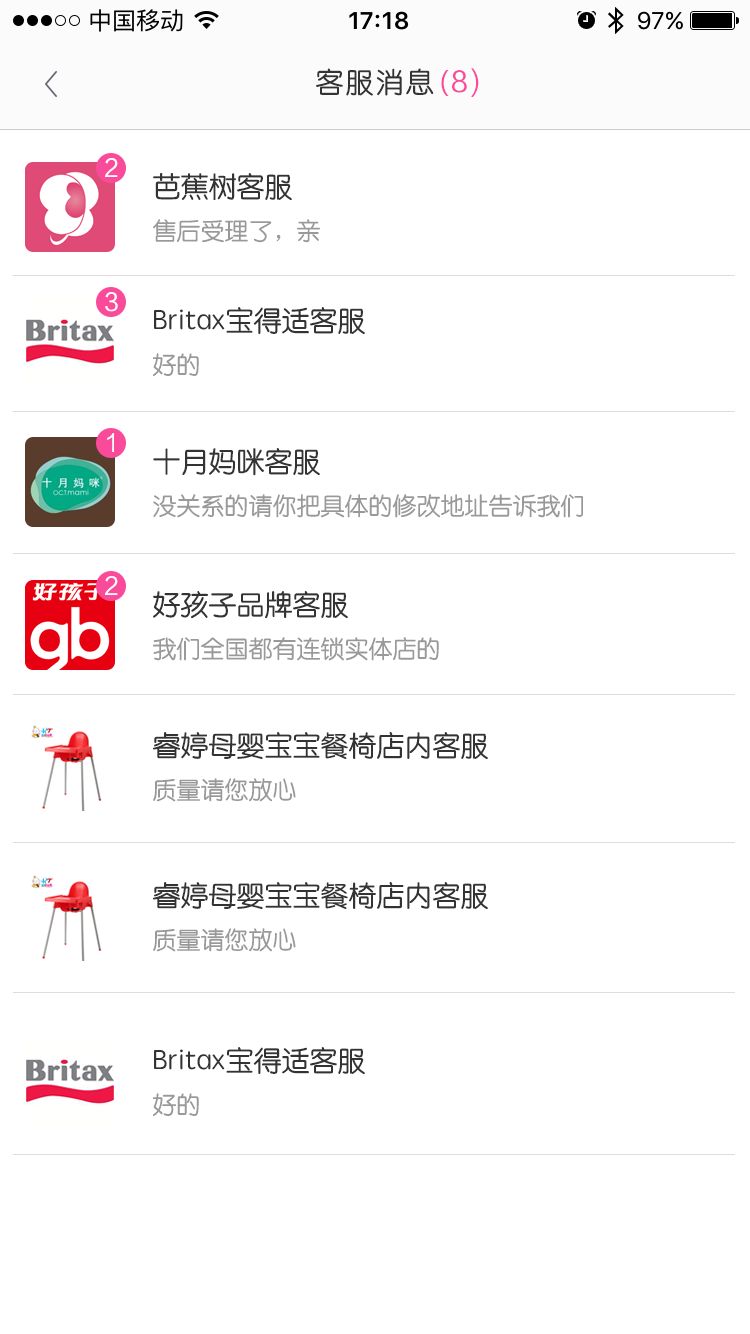
<style>
.page{position:relative;width:750px;height:1334px;background:#ffffff}
.page>*{position:absolute;margin:0}
.t1{font:28px "STYuanti-SC-Regular";letter-spacing:0.075em;color:#333333}
.t2{font:28px "FZLTHK_ZJRB--GBK1-0";letter-spacing:0.075em;color:#fa4b9b}
.t3{font:28px "MicrosoftYaHei";letter-spacing:0.075em;color:#333333}
.t4{font:28px "MicrosoftYaHei";letter-spacing:0.075em;color:#fa4b9b}
.t5{font:24px "FZLTHK_ZJRB--GBK1-0";color:#fffefe}
.t6{font:28px "STYuanti-SC-Regular";color:#333333}
.t7{font:24px "STYuanti-SC-Regular";color:#999999}
</style>
<div class="page">
<p class="t1" style="left:316px;top:68px;width:118px;height:28px">客服消息</p>
<p class="t2" style="left:441px;top:68px;width:38px;height:29px"><span class="t3"> </span><span class="t4">(</span>8)</p>
<p class="t5" style="left:105px;top:158px;width:13px;height:19px">2</p>
<p class="t6" style="left:153px;top:173px;width:139px;height:28px">芭蕉树客服</p>
<p class="t7" style="left:153px;top:219px;width:167px;height:24px">售后受理了，亲</p>
<p class="t5" style="left:105px;top:292px;width:13px;height:20px">3</p>
<p class="t6" style="left:154px;top:307px;width:211px;height:28px">Britax宝得适客服</p>
<p class="t7" style="left:153px;top:353px;width:46px;height:23px">好的</p>
<p class="t5" style="left:107px;top:433px;width:7px;height:19px">1</p>
<p class="t6" style="left:153px;top:448px;width:167px;height:28px">十月妈咪客服</p>
<p class="t7" style="left:153px;top:494px;width:430px;height:24px">没关系的请你把具体的修改地址告诉我们</p>
<p class="t5" style="left:105px;top:576px;width:13px;height:19px">2</p>
<p class="t6" style="left:153px;top:591px;width:195px;height:28px">好孩子品牌客服</p>
<p class="t7" style="left:153px;top:637px;width:286px;height:24px">我们全国都有连锁实体店的</p>
<p class="t6" style="left:153px;top:732px;width:335px;height:28px">睿婷母婴宝宝餐椅店内客服</p>
<p class="t7" style="left:153px;top:778px;width:143px;height:24px">质量请您放心</p>
<p class="t6" style="left:153px;top:882px;width:335px;height:28px">睿婷母婴宝宝餐椅店内客服</p>
<p class="t7" style="left:153px;top:928px;width:143px;height:24px">质量请您放心</p>
<p class="t6" style="left:154px;top:1047px;width:211px;height:28px">Britax宝得适客服</p>
<p class="t7" style="left:153px;top:1093px;width:46px;height:23px">好的</p>
</div>
